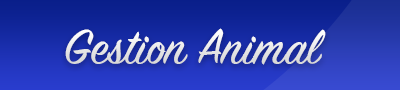
<style>
.page{position:relative;width:400px;height:90px}
.page>*{position:absolute;margin:0}
.t1{font:53.8px "SignPainter-HouseScript";color:#e5e5e5}
</style>
<div class="page">
<p class="t1" style="left:65px;top:28px;width:261px;height:37px">Gestion Animal</p>
</div>
